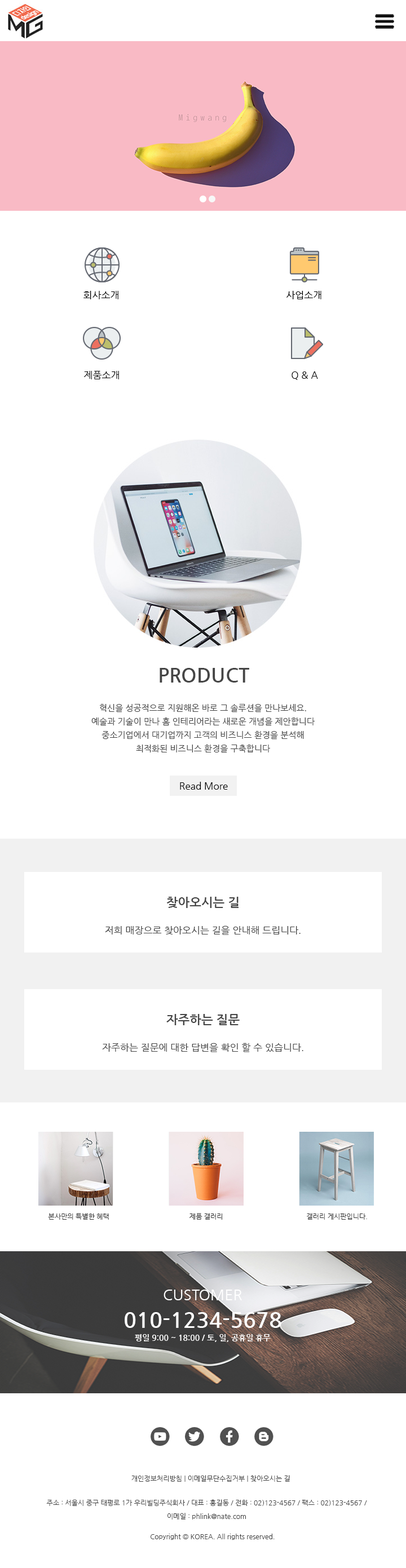
<style>
.page{position:relative;width:406px;height:1568px;background:#ffffff}
.page>*{position:absolute;margin:0}
.t1{font:9.6px "NanumGothic";color:#000000}
.t2{font:19.7px "NanumGothicBold";color:#454545}
.t3{font:8.5px/13.5px "NanumGothic";color:#454545}
.t4{font:9.6px/13.5px "NanumGothic";color:#454545}
.t5{font:9.6px/13.5px "NanumGothic";color:#ffffff}
.t6{font:12.4px/13.5px "NanumGothicBold";color:#454545}
.t7{font:6.8px "NanumGothic";color:#333333}
.t8{font:7.9px/13.5px "NanumGothicBold";color:#ffffff}
.t9{font:14.7px/13.5px "NanumGothic";color:#ffffff}
.t10{font:21.4px/13.5px "NanumGothicBold";color:#ffffff}
.t11{font:6.8px "NanumGothic";color:#454545}
.t12{font:6.8px/13.5px "NanumGothic";color:#454545}
</style>
<div class="page">
<p class="t1" style="left:83px;top:291px;width:35px;height:8px">회사소개</p>
<p class="t1" style="left:286px;top:291px;width:35px;height:8px">사업소개</p>
<p class="t1" style="left:84px;top:371px;width:35px;height:8px">제품소개</p>
<p class="t1" style="left:291px;top:371px;width:27px;height:9px">Q &amp; A</p>
<p class="t2" style="left:160px;top:668px;width:89px;height:15px">PRODUCT</p>
<p class="t3" style="left:91px;top:704px;width:224px;height:49px;text-align:center">혁신을 성공적으로 지원해온 바로 그 솔루션을 만나보세요.<br>예술과 기술이 만나 홈 인테리어라는 새로운 개념을 제안합니다<br>중소기업에서 대기업까지 고객의 비즈니스 환경을 분석해<br>최적화된 비즈니스 환경을 구축합니다</p>
<p class="t1" style="left:180px;top:782px;width:48px;height:8px">Read More</p>
<p class="t4" style="left:105px;top:897px;width:195px;height:38px;text-align:center"><span class="t5"><br><br></span><span class="t6">찾아오시는 길<br><br></span>저희 매장으로 찾아오시는 길을 안내해 드립니다.</p>
<p class="t4" style="left:102px;top:1014px;width:201px;height:38px;text-align:center"><span class="t5"><br></span><span class="t6"><br>자주하는 질문<br><br></span>자주하는 질문에 대한 답변을 확인 할 수 있습니다.</p>
<p class="t7" style="left:48px;top:1213px;width:61px;height:7px">본사만의 특별한 혜택</p>
<p class="t7" style="left:189px;top:1213px;width:33px;height:7px">제품 갤러리</p>
<p class="t7" style="left:307px;top:1213px;width:60px;height:7px">갤러리 게시판입니다.</p>
<p class="t8" style="left:125px;top:1290px;width:156px;height:52px;text-align:center"><span class="t9">CUSTOMER<br><br></span><span class="t10">010-1234-5678<br></span>평일 9:00 ~ 18:00 / 토, 일, 공휴일 휴무</p>
<p class="t11" style="left:131px;top:1475px;width:159px;height:7px">개인정보처리방침 | 이메일무단수집거부 | 찾아오시는 길</p>
<p class="t12" style="left:46px;top:1499px;width:321px;height:21px;text-align:center">주소 : 서울시 중구 태평로 1가 우리빌딩주식회사 / 대표 : 홍길동 / 전화 : 02)123-4567 / 팩스 : 02)123-4567 / 이메일 : phlink@nate.com</p>
<p class="t11" style="left:150px;top:1534px;width:124px;height:6px">Copyright © KOREA. All rights reserved.</p>
</div>
